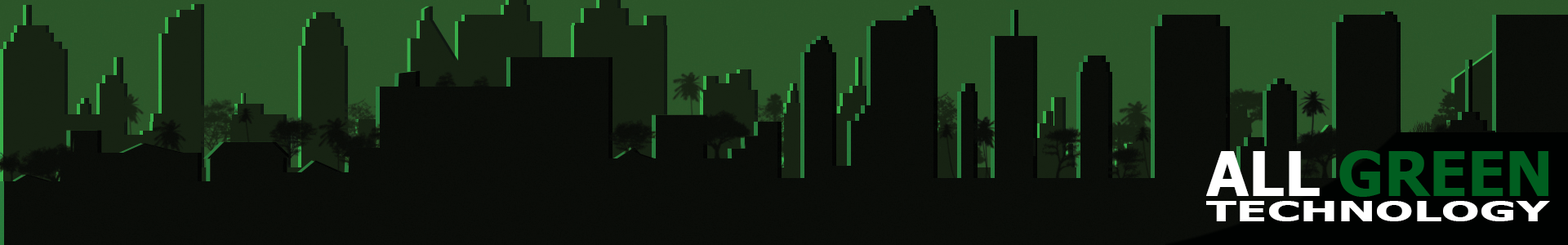
<style>
.page{position:relative;width:1568px;height:245px}
.page>*{position:absolute;margin:0}
.t1{font:61.9px "Tahoma-Bold";color:#005e20}
.t2{font:61.9px "Tahoma-Bold";color:#ffffff}
.t3{font:28.5px "Tahoma-Bold";color:#ffffff;scale:1.73 1}
</style>
<div class="page">
<p class="t1" style="left:1206px;top:150px;width:342px;height:47px"><span class="t2">ALL</span> GREEN</p>
<p class="t3" style="left:1206px;top:201px;width:344px;height:20px">TECHNOLOGY</p>
</div>
